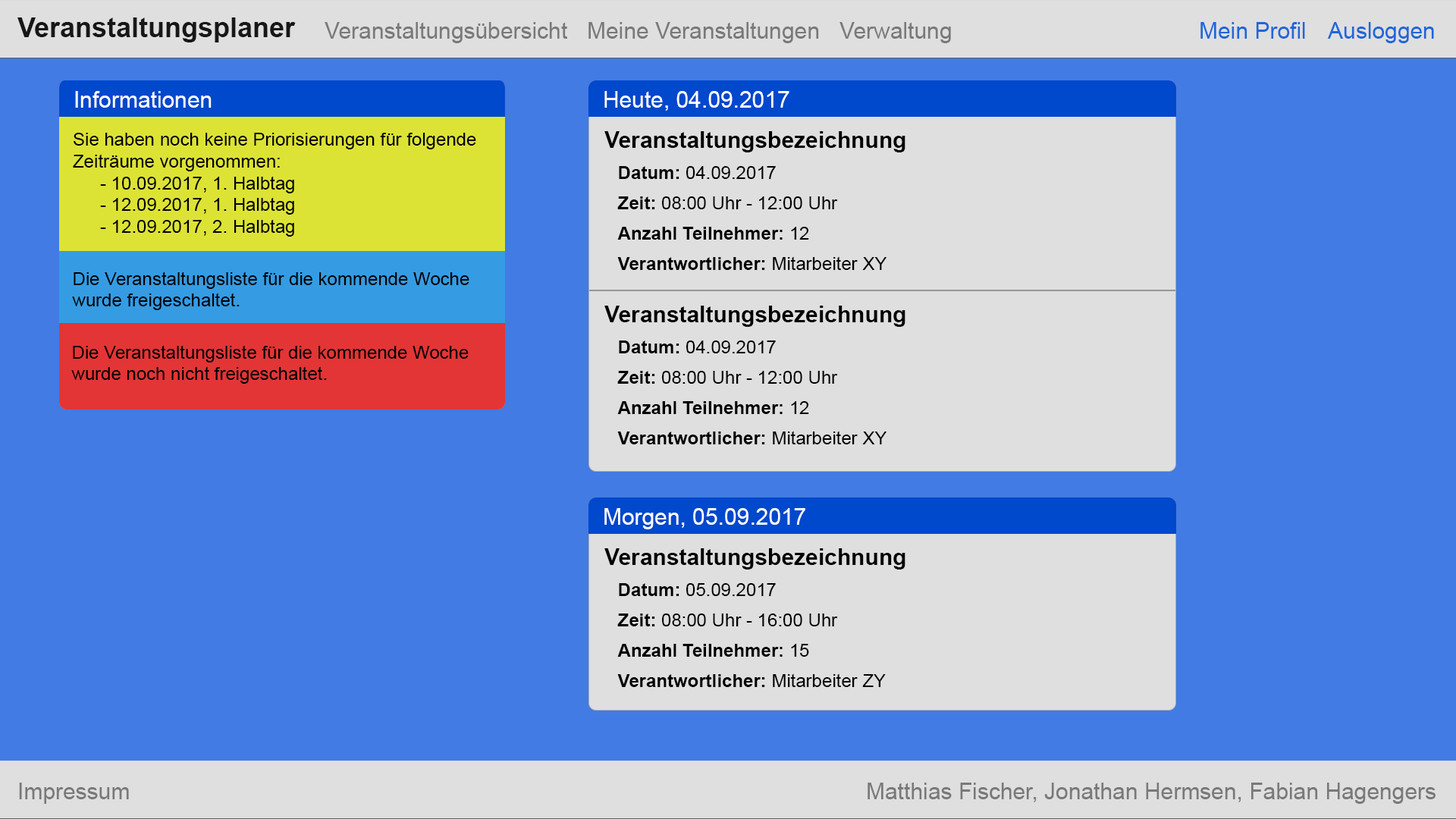
<style>
.page{position:relative;width:1456px;height:819px;background:#427be3}
.page>*{position:absolute;margin:0}
.t1{font:27.3px "Arial-BoldMT";color:#171717}
.t2{font:22.7px "ArialMT";color:#797979}
.t3{font:22.7px "ArialMT";color:#2066da}
.t4{font:22.7px "ArialMT";color:#ffffff}
.t5{font:18.2px "ArialMT";color:#000000}
.t6{font:22.7px "Arial-BoldMT";color:#000000}
.t7{font:18.2px/30.3px "ArialMT";color:#000000}
.t8{font:18.2px/30.3px "Arial-BoldMT";color:#000000}
</style>
<div class="page">
<p class="t1" style="left:17px;top:17px;width:279px;height:25px">Veranstaltungsplaner</p>
<p class="t2" style="left:325px;top:22px;width:242px;height:21px">Veranstaltungsübersicht</p>
<p class="t2" style="left:588px;top:22px;width:231px;height:21px">Meine Veranstaltungen</p>
<p class="t2" style="left:839px;top:22px;width:112px;height:21px">Verwaltung</p>
<p class="t3" style="left:1200px;top:22px;width:105px;height:17px">Mein Profil</p>
<p class="t3" style="left:1327px;top:22px;width:107px;height:21px">Ausloggen</p>
<p class="t4" style="left:75px;top:91px;width:137px;height:17px">Informationen</p>
<p class="t4" style="left:604px;top:91px;width:185px;height:20px">Heute, 04.09.2017</p>
<p class="t5" style="left:73px;top:133px;width:403px;height:104px">Sie haben noch keine Priorisierungen für folgende <br>Zeiträume vorgenommen:<br> - 10.09.2017, 1. Halbtag<br> - 12.09.2017, 1. Halbtag<br> - 12.09.2017, 2. Halbtag</p>
<p class="t6" style="left:604px;top:131px;width:301px;height:21px">Veranstaltungsbezeichnung</p>
<p class="t7" style="left:617px;top:166px;width:269px;height:104px"><span class="t8">Datum: </span>04.09.2017<br><span class="t8">Zeit: </span>08:00 Uhr - 12:00 Uhr<br><span class="t8">Anzahl Teilnehmer: </span>12<br><span class="t8">Verantwortlicher: </span>Mitarbeiter XY</p>
<p class="t5" style="left:72px;top:271px;width:397px;height:39px">Die Veranstaltungsliste für die kommende Woche<br>wurde freigeschaltet.</p>
<p class="t6" style="left:604px;top:306px;width:301px;height:21px">Veranstaltungsbezeichnung</p>
<p class="t7" style="left:617px;top:340px;width:269px;height:104px"><span class="t8">Datum: </span>04.09.2017<br><span class="t8">Zeit: </span>08:00 Uhr - 12:00 Uhr<br><span class="t8">Anzahl Teilnehmer: </span>12<br><span class="t8">Verantwortlicher: </span>Mitarbeiter XY</p>
<p class="t5" style="left:71px;top:345px;width:398px;height:39px">Die Veranstaltungsliste für die kommende Woche<br>wurde noch nicht freigeschaltet.</p>
<p class="t4" style="left:604px;top:508px;width:201px;height:21px">Morgen, 05.09.2017</p>
<p class="t6" style="left:604px;top:548px;width:301px;height:22px">Veranstaltungsbezeichnung</p>
<p class="t7" style="left:617px;top:583px;width:269px;height:104px"><span class="t8">Datum: </span>05.09.2017<br><span class="t8">Zeit: </span>08:00 Uhr - 16:00 Uhr<br><span class="t8">Anzahl Teilnehmer: </span>15<br><span class="t8">Verantwortlicher: </span>Mitarbeiter ZY</p>
<p class="t2" style="left:19px;top:783px;width:110px;height:21px">Impressum</p>
<p class="t2" style="left:868px;top:783px;width:568px;height:21px">Matthias Fischer, Jonathan Hermsen, Fabian Hagengers</p>
</div>
